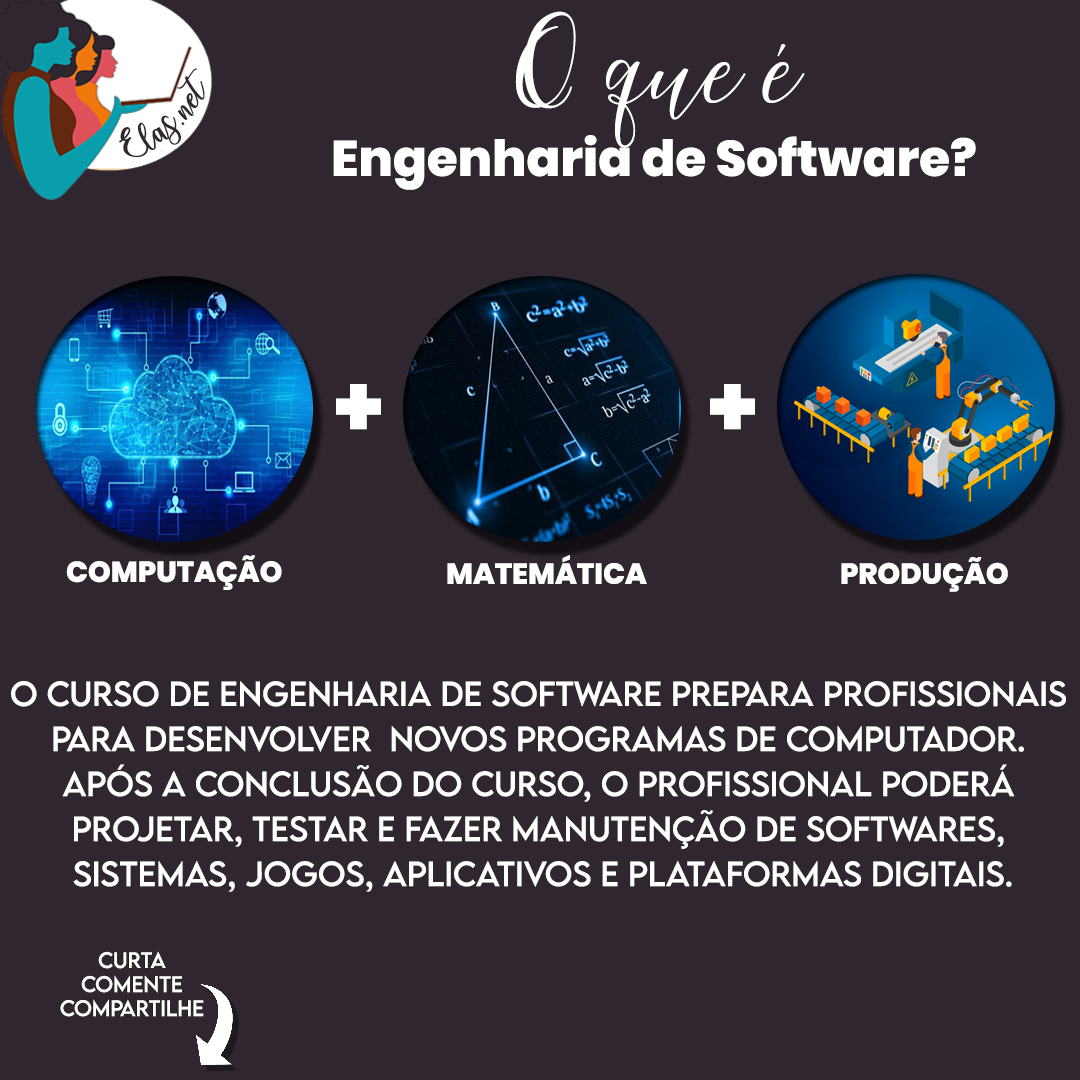
<style>
.page{position:relative;width:1080px;height:1080px;background:#2f262f}
.page>*{position:absolute;margin:0}
.t1{font:50px "Poppins-ExtraBold";color:#ffffff}
.t2{font:142.1px "MaheisaScript";color:#ffffff}
.t3{font:25px "charlinda-Regular";color:#2f262f;scale:1.18 1}
.t4{font:88px "Poppins-ExtraBold";color:#ffffff}
.t5{font:29px "Poppins-ExtraBold";color:#ffffff}
.t6{font:31px/45px "LEMONMILK-Regular";color:#ffffff}
.t7{font:20px "LEMONMILK-Regular"}
.t8{font:20px "LEMONMILK-Regular";color:#ffffff}
</style>
<div class="page">
<p class="t1" style="left:333px;top:11px;width:643px;height:179px;text-align:center"><span class="t2">O que é<br></span>Engenharia de Software?</p>
<p class="t3" style="left:119px;top:68px;width:86px;height:89px;rotate:-43deg">Elas.net</p>
<p class="t4" style="left:336px;top:384px;width:45px;height:46px">+</p>
<p class="t4" style="left:710px;top:384px;width:45px;height:46px">+</p>
<p class="t5" style="left:66px;top:555px;width:216px;height:35px">COMPUTAÇÃO</p>
<p class="t5" style="left:447px;top:555px;width:200px;height:29px">MATEMÁTICA</p>
<p class="t5" style="left:841px;top:557px;width:167px;height:35px">PRODUÇÃO</p>
<p class="t6" style="left:11px;top:681px;width:1055px;height:211px;text-align:center">O curso de Engenharia de Software prepara profissionais <br>para desenvolver  novos programas de computador. <br>Após a conclusão do curso, o profissional poderá <br>projetar, testar e fazer manutenção de softwares, <br>sistemas, jogos, aplicativos e plataformas digitais.</p>
<p class="t7" style="left:59px;top:951px;width:144px;height:66px;text-align:center">Curta<br>Comente<br>Compartilhe</p>
<p class="t8" style="left:60px;top:951px;width:144px;height:66px;text-align:center">Curta<br>Comente<br>Compartilhe</p>
</div>
